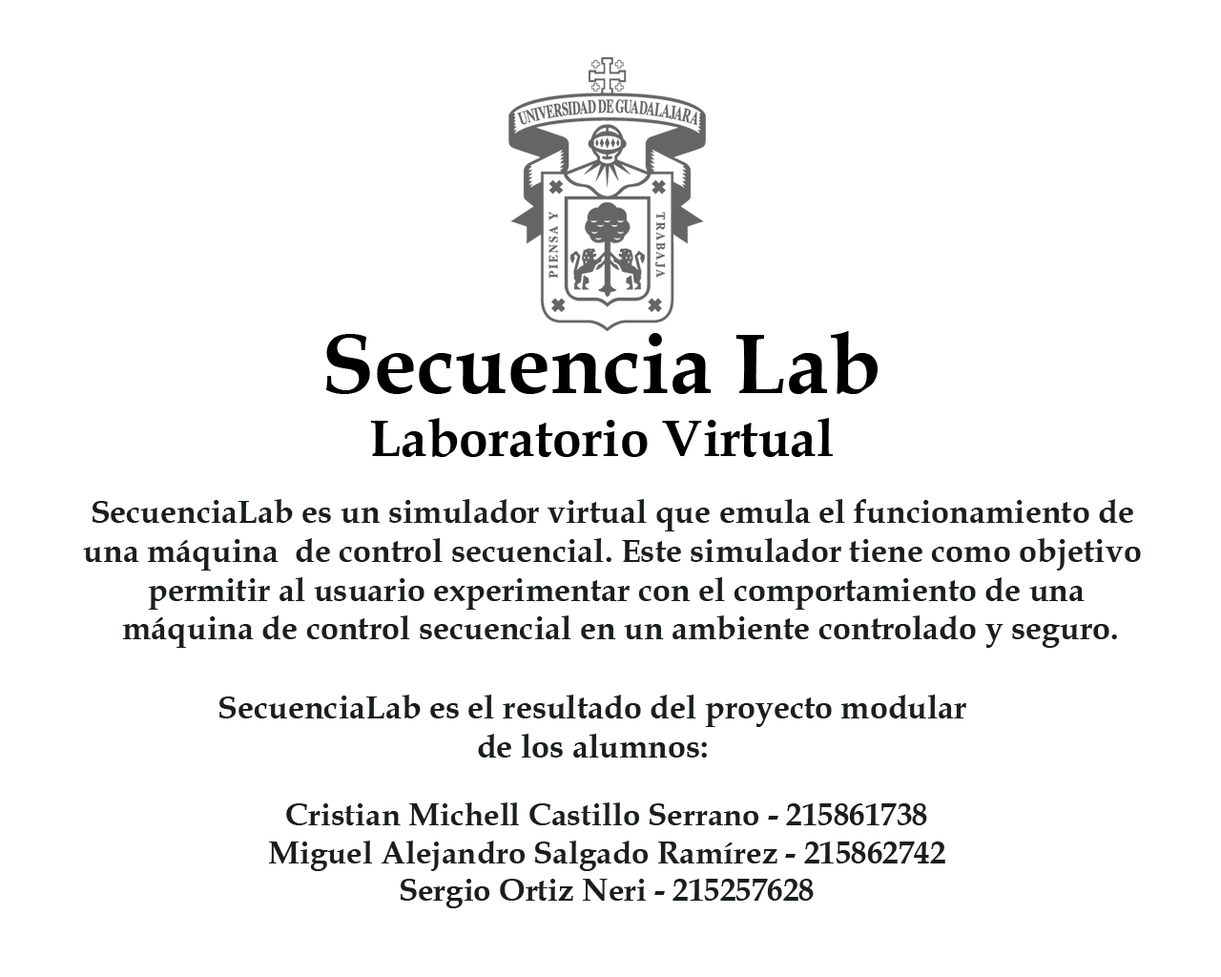
<style>
.page{position:relative;width:1221px;height:977px;background:#ffffff}
.page>*{position:absolute;margin:0}
.t1{font:52.5px "BookAntiqua-Bold";color:#000000}
.t2{font:85.8px "BookAntiqua-Bold";color:#000000}
.t3{font:32.4px "BookAntiqua-Bold";color:#1b1f1b}
.t4{font:31.5px "BookAntiqua-Bold";color:#1b1f1b}
</style>
<div class="page">
<p class="t1" style="left:326px;top:331px;width:552px;height:126px;text-align:center"><span class="t2">Secuencia Lab<br></span>Laboratorio Virtual</p>
<p class="t3" style="left:83px;top:499px;width:1058px;height:149px;text-align:center">SecuenciaLab es un simulador virtual que emula el funcionamiento de <br>una máquina  de control secuencial. Este simulador tiene como objetivo <br>permitir al usuario experimentar con el comportamiento de una<br> máquina de control secuencial en un ambiente controlado y seguro.</p>
<p class="t3" style="left:218px;top:694px;width:748px;height:63px;text-align:center">SecuenciaLab es el resultado del proyecto modular<br>de los alumnos:</p>
<p class="t4" style="left:269px;top:802px;width:676px;height:106px;text-align:center">Cristian Michell Castillo Serrano - 215861738<br>Miguel Alejandro Salgado Ramírez - 215862742<br>Sergio Ortiz Neri - 215257628</p>
</div>
